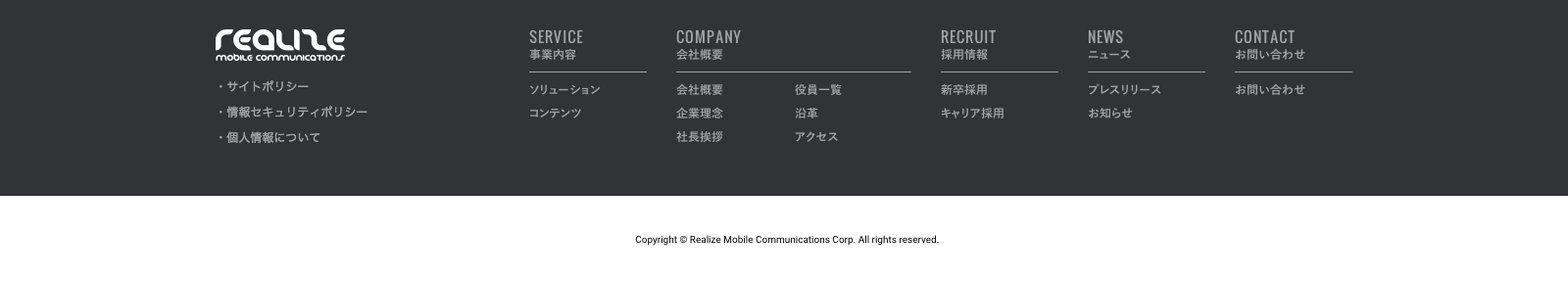
<style>
.page{position:relative;width:1568px;height:284px;background:#313335}
.page>*{position:absolute;margin:0}
.t1{font:11.8px/15.7px "YuGo-Bold";color:#a3a3a3}
.t2{font:14.7px/58.8px "Oswald-Regular";letter-spacing:0.07em;color:#a3a3a3;text-transform:uppercase}
.t3{font:11.8px/25.5px "HiraKakuPro-W3";color:#a2a3a3}
.t4{font:9.8px "Roboto-Regular";color:#000000}
</style>
<div class="page">
<p class="t1" style="left:529px;top:29px;width:71px;height:90px"><span class="t2">SERVICE<br></span>事業内容<br>ソリューション<br>コンテンツ</p>
<p class="t1" style="left:676px;top:29px;width:65px;height:113px"><span class="t2">COMPANY<br></span>会社概要<br>会社概要<br>企業理念<br>社長挨拶</p>
<p class="t1" style="left:941px;top:29px;width:63px;height:90px"><span class="t2">RECRUIT<br></span>採用情報<br>新卒採用<br>キャリア採用</p>
<p class="t1" style="left:1088px;top:29px;width:73px;height:90px"><span class="t2">NEWS<br></span>ニュース<br>プレスリリース<br>お知らせ</p>
<p class="t1" style="left:1235px;top:29px;width:70px;height:66px"><span class="t2">CONTACT<br></span>お問い合わせ<br>お問い合わせ</p>
<p class="t3" style="left:220px;top:80px;width:148px;height:63px">・サイトポリシー　<br>・情報セキュリティポリシー<br>・個人情報について</p>
<p class="t1" style="left:795px;top:84px;width:47px;height:58px"><span class="t2"><br></span><br>役員一覧<br>沿革<br>アクセス</p>
<p class="t4" style="left:635px;top:235px;width:304px;height:11px">Copyright © Realize Mobile Communications Corp. All rights reserved.</p>
</div>
